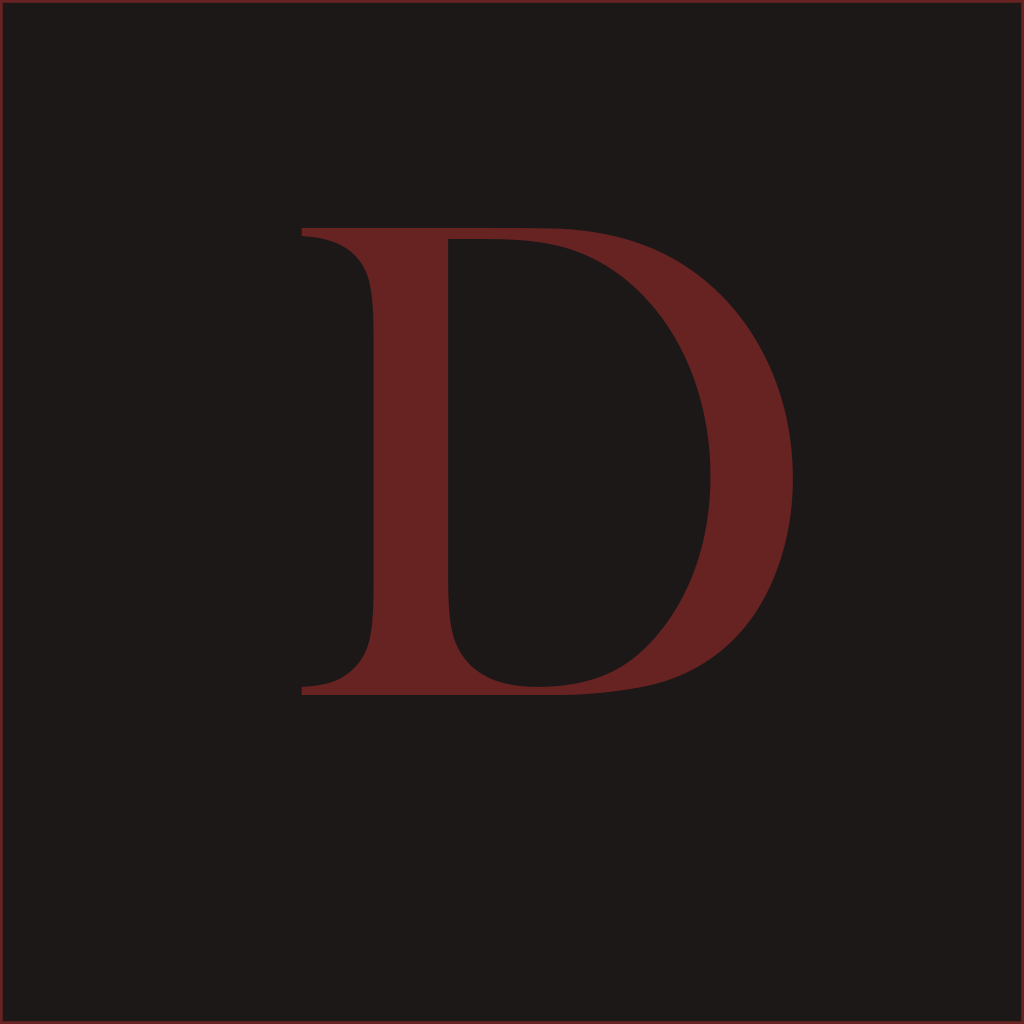
<style>
.page{position:relative;width:1024px;height:1024px;background:#1c1818}
.page>*{position:absolute;margin:0}
.t1{font:700px "BaskOldFace";color:#672222}
</style>
<div class="page">
<p class="t1" style="left:301px;top:227px;width:492px;height:468px">D</p>
</div>
